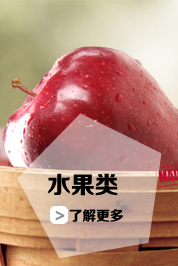
<style>
.page{position:relative;width:178px;height:266px}
.page>*{position:absolute;margin:0}
.t1{font:14px/36px "FZZDHJW--GB1-0";color:#000000}
.t2{font:24px/36px "FZZDHJW--GB1-0";color:#000000}
.t3{font:14px/36px "FZZDHJW--GB1-0";color:#8e8e8e}
</style>
<div class="page">
<p class="t1" style="left:48px;top:173px;width:75px;height:49px"><span class="t2">水果类<br>  </span><span class="t3">&gt;</span> 了解更多</p>
</div>
